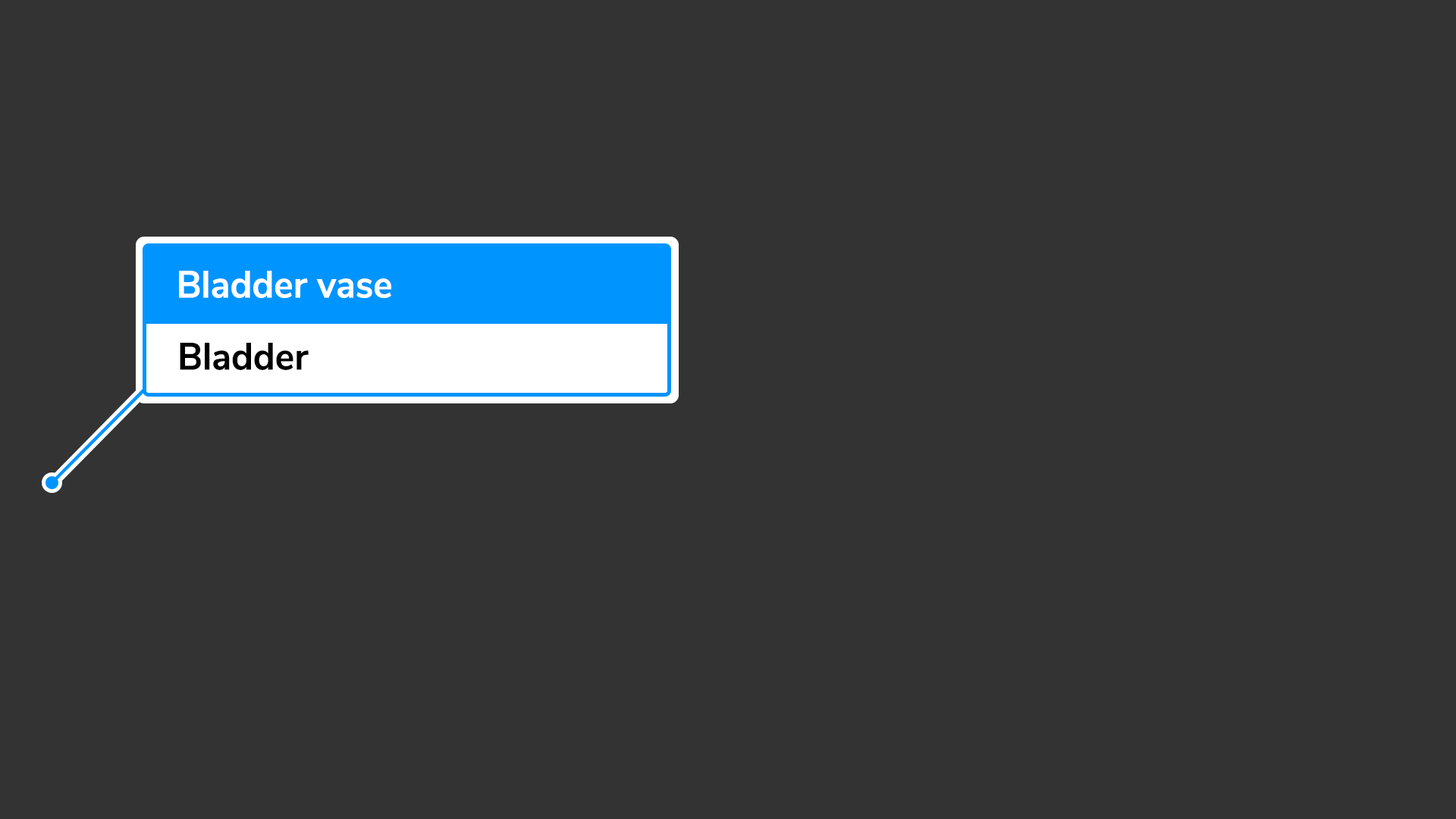
<style>
.page{position:relative;width:1456px;height:819px;background:#333333}
.page>*{position:absolute;margin:0}
.t1{font:37.9px "NunitoArrowSans-Bold";color:#ffffff;scale:0.96 1}
.t2{font:37.9px "NunitoArrowSans-Bold";color:#000000;scale:0.96 1}
</style>
<div class="page">
<p class="t1" style="left:179px;top:271px;width:212px;height:27px">Bladder vase</p>
<p class="t2" style="left:180px;top:343px;width:129px;height:27px">Bladder</p>
</div>
